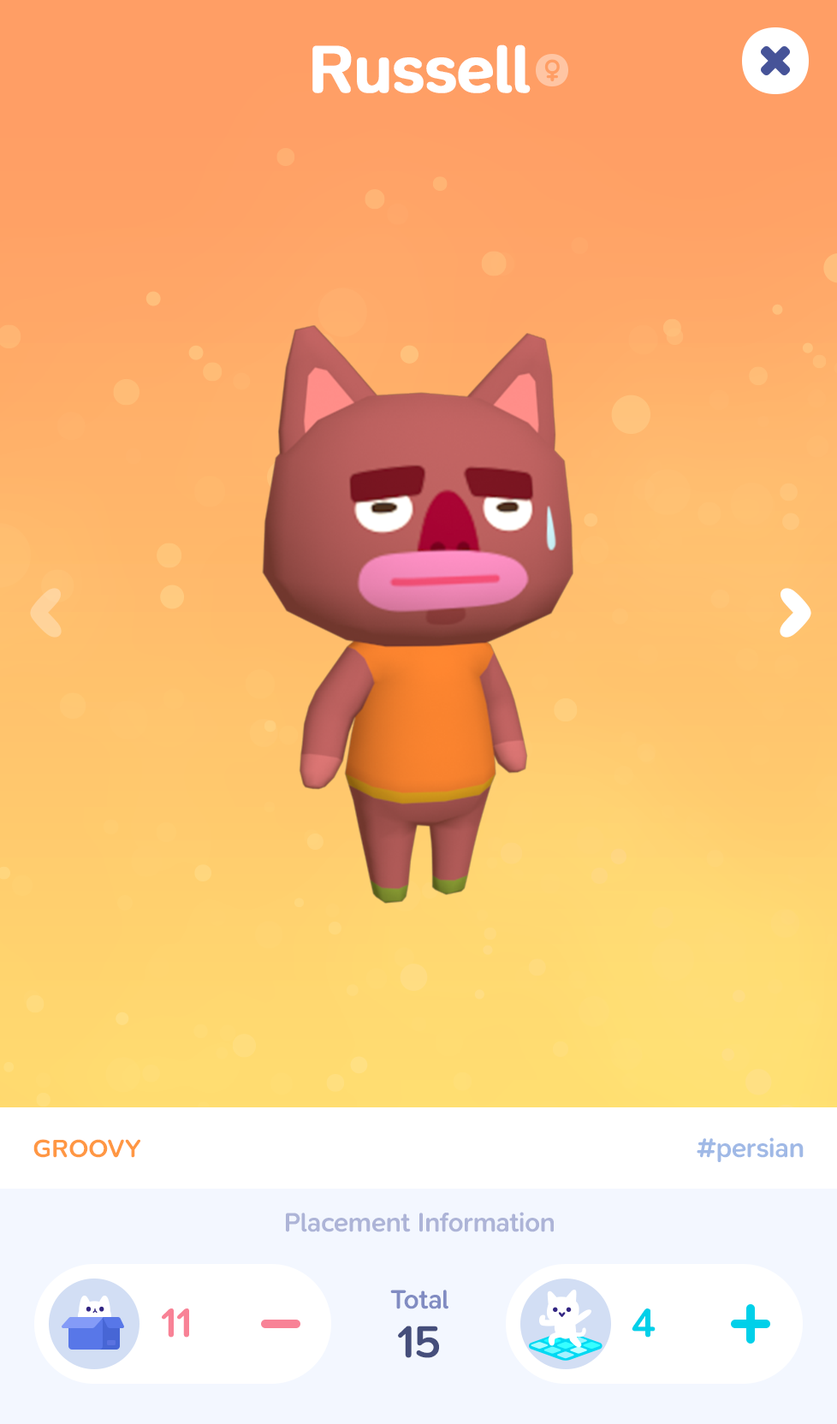
<style>
.page{position:relative;width:837px;height:1424px}
.page>*{position:absolute;margin:0}
.t1{font:68.5px "SNPro-SemiBold";letter-spacing:-0.01em;color:#ffffff;font-weight:bold}
.t2{font:25.7px "SNPro-SemiBold";letter-spacing:-0.01em;color:#ff9743;text-transform:uppercase}
.t3{font:27.4px "SNPro-SemiBold";letter-spacing:-0.01em;color:#a0b9e6}
.t4{font:27.4px "SNPro-SemiBold";letter-spacing:-0.01em;color:#adb4d7}
.t5{font:27.4px "SNPro-SemiBold";letter-spacing:-0.01em;color:#818cc2}
.t6{font:41.7px "SNPro-SemiBold";letter-spacing:-0.01em;color:#f88296}
.t7{font:41.7px "SNPro-SemiBold";letter-spacing:-0.01em;color:#00d0e9}
.t8{font:46.2px "SNPro-SemiBold";letter-spacing:-0.01em;color:#454e7b}
</style>
<div class="page">
<p class="t1" style="left:312px;top:45px;width:219px;height:48px">Russell</p>
<p class="t2" style="left:33px;top:1139px;width:107px;height:19px">Groovy</p>
<p class="t3" style="left:697px;top:1138px;width:107px;height:24px">#persian</p>
<p class="t4" style="left:286px;top:1212px;width:268px;height:21px">Placement Information</p>
<p class="t5" style="left:390px;top:1290px;width:59px;height:20px">Total</p>
<p class="t6" style="left:162px;top:1309px;width:27px;height:29px">11</p>
<p class="t7" style="left:632px;top:1309px;width:24px;height:29px">4</p>
<p class="t8" style="left:398px;top:1326px;width:41px;height:32px">15</p>
</div>
